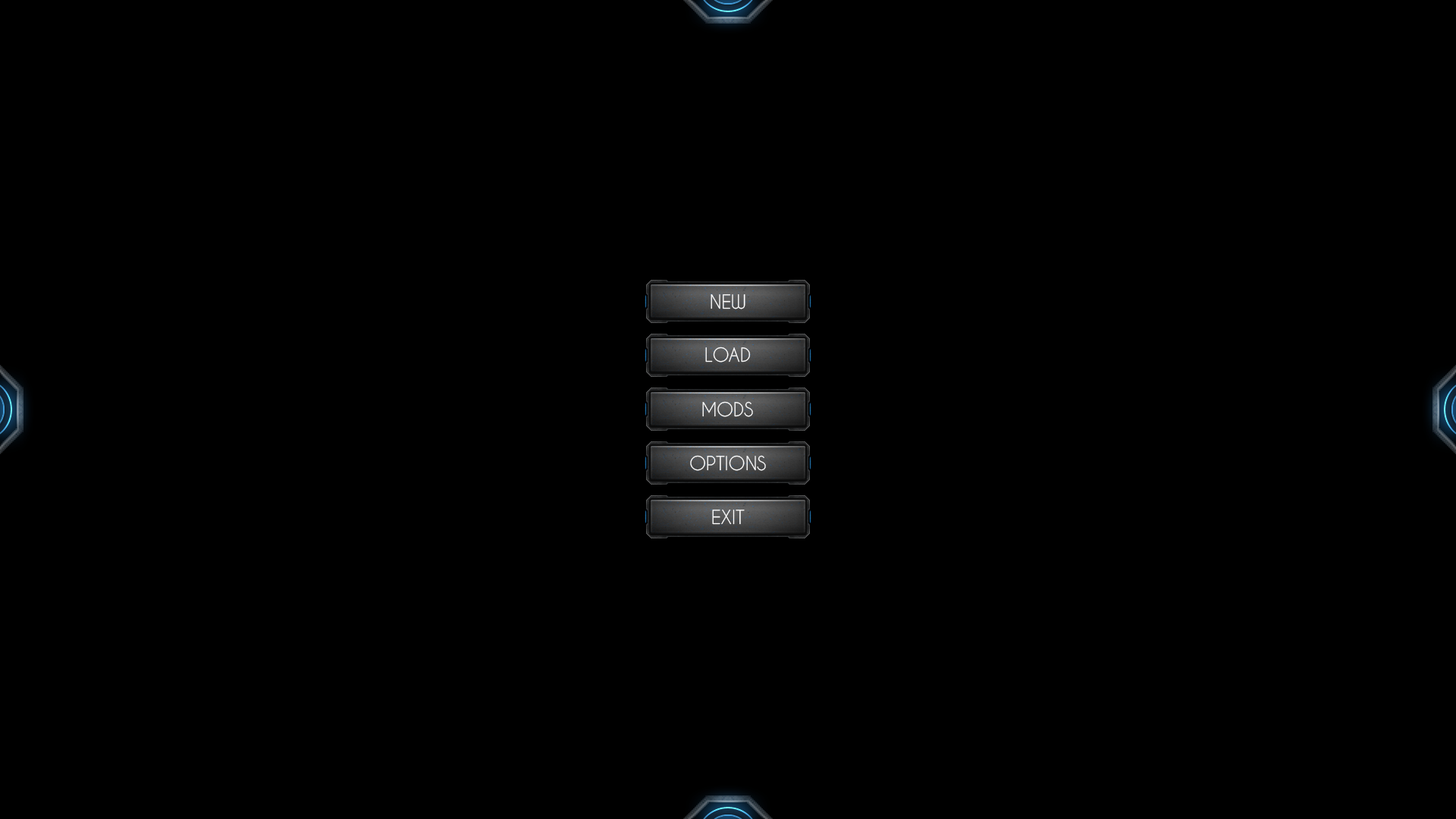
<style>
.page{position:relative;width:1456px;height:819px;background:#000000}
.page>*{position:absolute;margin:0}
.t1{font:18.2px "CaviarDreams";color:#ffffff}
</style>
<div class="page">
<p class="t1" style="left:711px;top:294px;width:34px;height:15px">NEW</p>
<p class="t1" style="left:705px;top:347px;width:46px;height:15px">LOAD</p>
<p class="t1" style="left:702px;top:401px;width:51px;height:16px">MODS</p>
<p class="t1" style="left:690px;top:455px;width:76px;height:16px">OPTIONS</p>
<p class="t1" style="left:712px;top:510px;width:33px;height:15px">EXIT</p>
</div>
